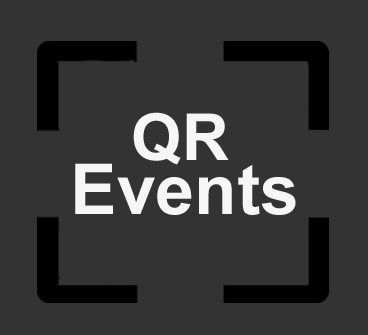
<style>
.page{position:relative;width:368px;height:335px;background:#333333}
.page>*{position:absolute;margin:0}
.t1{font:65px "Arial-BoldMT";color:#f6f6f6}
.t2{font:69.9px "Arial-BoldMT";color:#f6f6f6}
</style>
<div class="page">
<p class="t1" style="left:133px;top:112px;width:96px;height:53px">QR</p>
<p class="t2" style="left:75px;top:163px;width:221px;height:52px">Events</p>
</div>
